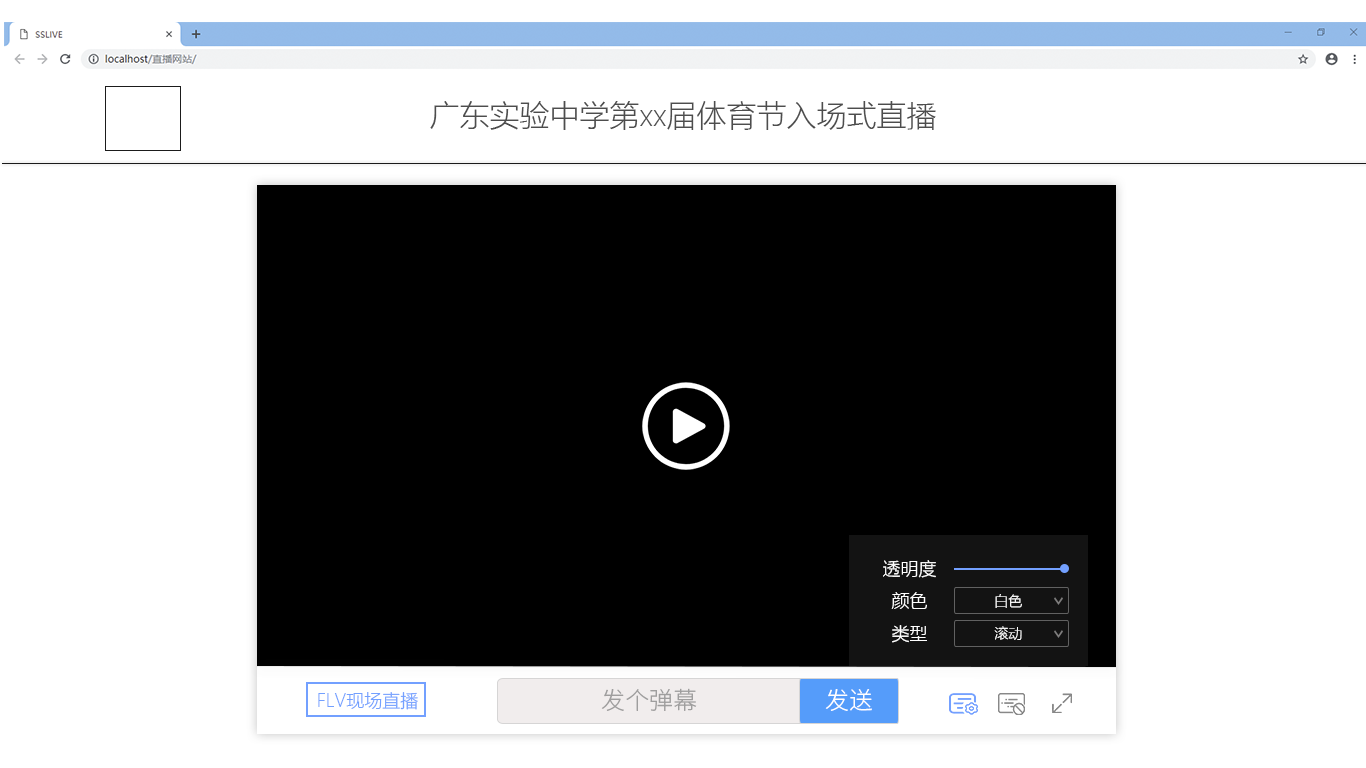
<style>
.page{position:relative;width:1366px;height:768px;background:#ffffff}
.page>*{position:absolute;margin:0}
.t1{font:30px "MicrosoftYaHeiLight";color:#4d4d4d}
.t2{font:18px "MicrosoftYaHeiLight";color:#ffffff}
.t3{font:14px "MicrosoftYaHeiLight";color:#ffffff}
.t4{font:24px "SourceHanSansSC-Light";color:#9f9e9e}
.t5{font:24px "SourceHanSansSC-Light";color:#ffffff}
.t6{font:18px "MicrosoftYaHeiLight";color:#73a0ff}
</style>
<div class="page">
<p class="t1" style="left:430px;top:101px;width:506px;height:29px">广东实验中学第xx届体育节入场式直播</p>
<p class="t2" style="left:883px;top:560px;width:53px;height:18px">透明度</p>
<p class="t2" style="left:891px;top:592px;width:36px;height:17px">颜色</p>
<p class="t3" style="left:995px;top:594px;width:27px;height:14px">白色</p>
<p class="t2" style="left:892px;top:625px;width:35px;height:18px">类型</p>
<p class="t3" style="left:994px;top:626px;width:28px;height:14px">滚动</p>
<p class="t4" style="left:601px;top:688px;width:96px;height:23px">发个弹幕</p>
<p class="t5" style="left:825px;top:689px;width:47px;height:22px">发送</p>
<p class="t6" style="left:318px;top:692px;width:100px;height:18px">FLV现场直播</p>
</div>
